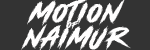
<style>
.page{position:relative;width:150px;height:50px;background:#333333}
.page>*{position:absolute;margin:0}
.t1{font:13.1px/12.5px "Horsemen-(Demo-Version)";letter-spacing:0.2em;color:#fffefe}
.t2{font:4.2px/12.5px "Horsemen-(Demo-Version)";letter-spacing:0.2em;color:#fffefe}
</style>
<div class="page">
<p class="t1" style="left:21px;top:0px;width:110px;height:52px;text-align:center">MOTION<br><span class="t2">OF</span> <br>NAIMUR</p>
</div>
